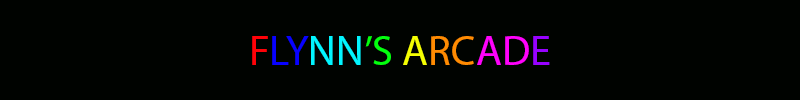
<style>
.page{position:relative;width:800px;height:100px;background:#000300}
.page>*{position:absolute;margin:0}
.t1{font:12px "MyriadPro-Regular";color:#0802ff}
.t2{font:12px "MyriadPro-Regular";color:#ff0208}
.t3{font:12px "MyriadPro-Regular";color:#02f6ff}
.t4{font:12px "MyriadPro-Regular";color:#02ff0e}
.t5{font:12px "MyriadPro-Regular";color:#f6ff02}
.t6{font:12px "MyriadPro-Regular";color:#ff8b02}
.t7{font:12px "MyriadPro-Regular";color:#ff02fc}
.t8{font:12px "MyriadPro-Regular";color:#9702ff}
</style>
<div class="page">
<p class="t1" style="left:252px;top:36px;width:298px;height:29px"><span class="t2">           F</span>LY<span class="t3">NN</span><span class="t4">’S </span><span class="t5">A</span><span class="t6">RC</span><span class="t7">AD</span><span class="t8">E</span></p>
</div>
